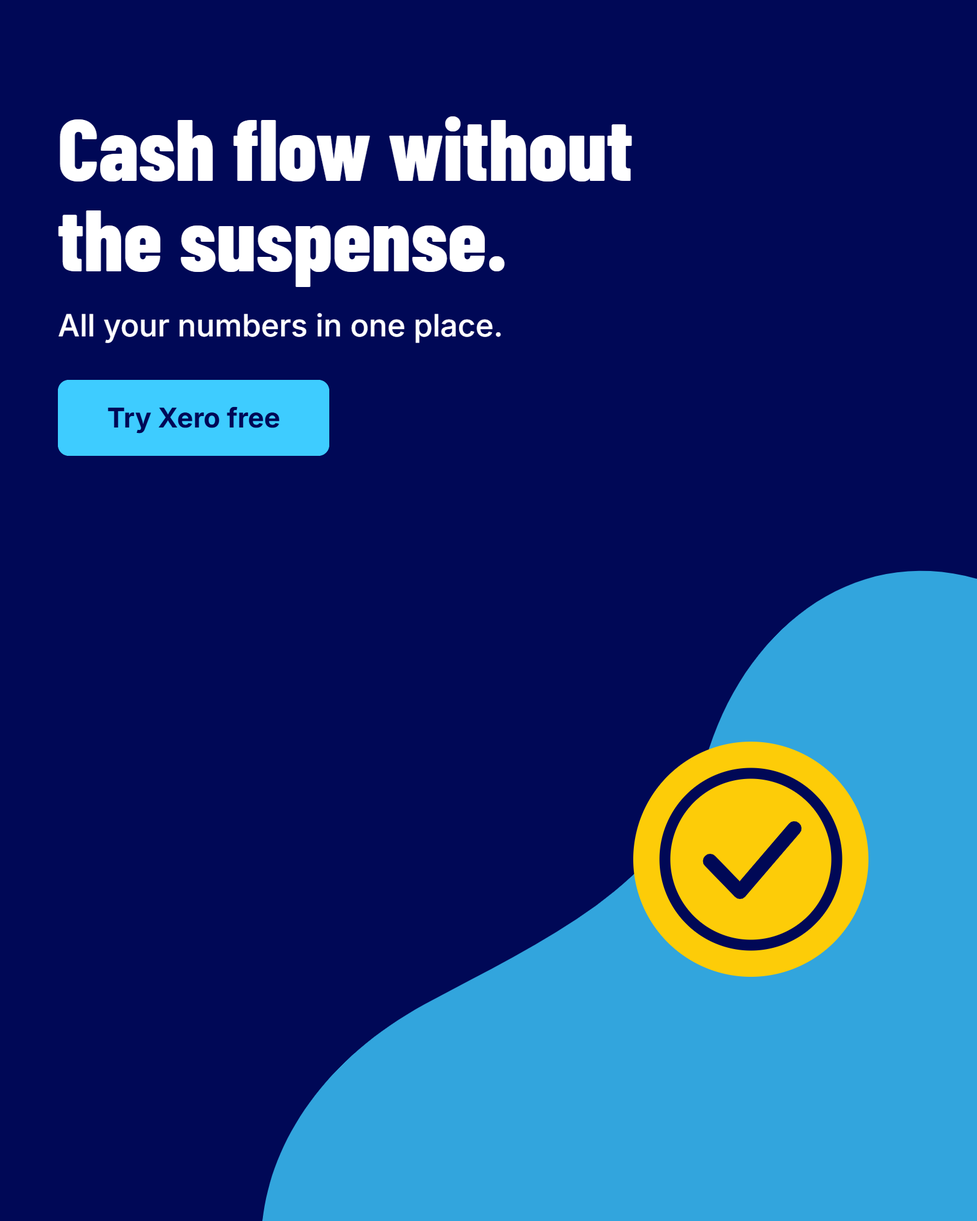
<style>
.page{position:relative;width:977px;height:1221px;background:#000856}
.page>*{position:absolute;margin:0}
.t1{font:86.8px/90.4px "National2Condensed-Bold";color:#ffffff}
.t2{font:30.7px "Inter-Medium";color:#ffffff}
.t3{font:27.1px "Inter-Bold";color:#000856}
</style>
<div class="page">
<p class="t1" style="left:58px;top:116px;width:574px;height:171px">Cash flow without<br>the suspense.</p>
<p class="t2" style="left:58px;top:313px;width:443px;height:30px">All your numbers in one place.</p>
<p class="t3" style="left:107px;top:406px;width:173px;height:27px">Try Xero free</p>
</div>
